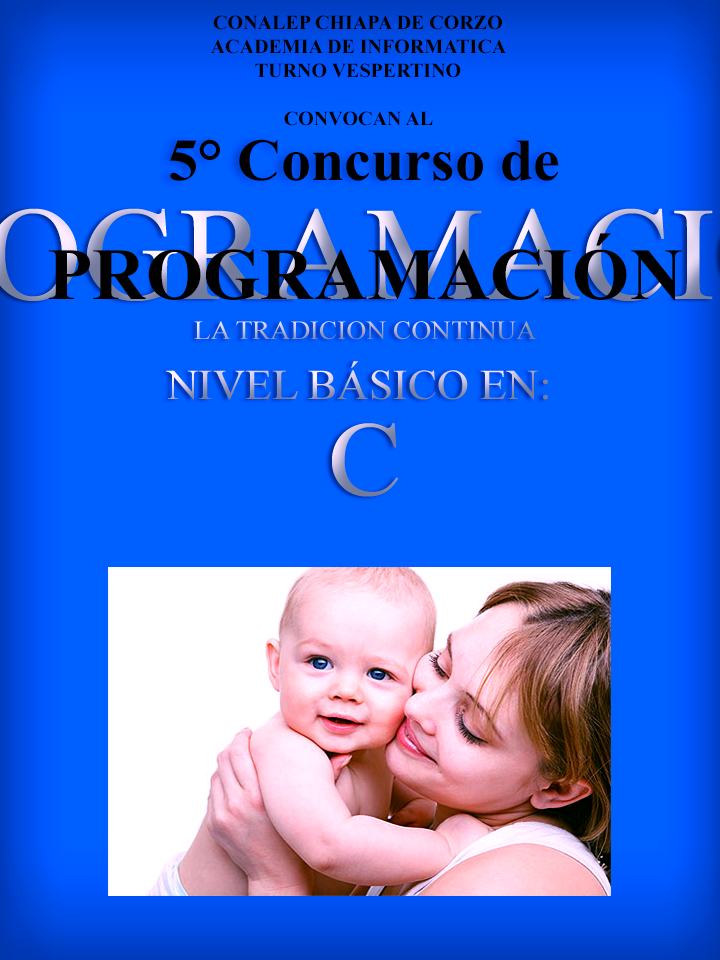
<style>
.page{position:relative;width:720px;height:960px;background:#005fff}
.page>*{position:absolute;margin:0}
.t1{font:20px "TimesNewRomanPS-BoldMT";color:#010000}
.t2{font:59.8px "TimesNewRomanPS-BoldMT";color:#010000}
.t3{font:73.3px "TimesNewRomanPS-BoldMT";color:#010000}
.t4{font:26.4px "TimesNewRomanPSMT";scale:1.04 1}
.t5{font:42.4px "TimesNewRomanPSMT";scale:1.04 1}
.t6{font:106.4px "TimesNewRomanPSMT";scale:1.04 1}
</style>
<div class="page">
<p class="t1" style="left:210px;top:15px;width:296px;height:111px;text-align:center">CONALEP CHIAPA DE CORZO<br>ACADEMIA DE INFORMATICA<br>TURNO VESPERTINO<br><br>CONVOCAN AL</p>
<p class="t2" style="left:170px;top:139px;width:389px;height:42px">5° Concurso de</p>
<p class="t3" style="left:48px;top:233px;width:634px;height:67px">PROGRAMACIÓN</p>
<p class="t4" style="left:194px;top:321px;width:342px;height:19px">LA TRADICION CONTINUA</p>
<p class="t5" style="left:166px;top:361px;width:382px;height:39px">NIVEL BÁSICO EN:</p>
<p class="t6" style="left:332px;top:423px;width:67px;height:74px">C</p>
</div>
